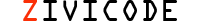
<style>
.page{position:relative;width:200px;height:21px;background:#ffffff}
.page>*{position:absolute;margin:0}
.t1{font:33px "OCRAExtended";color:#000000}
.t2{font:33px "OCRAExtended";color:#fa2f07}
</style>
<div class="page">
<p class="t1" style="left:23px;top:0px;width:154px;height:21px"><span class="t2">Z</span>IVICODE</p>
</div>
